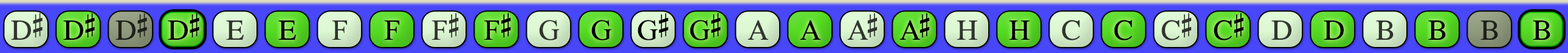
<style>
.page{position:relative;width:1568px;height:53px}
.page>*{position:absolute;margin:0}
.t1{font:29.2px "OpusChords";letter-spacing:-0.025em;color:#2f352d}
.t2{font:29.2px "OpusChords";letter-spacing:-0.025em;color:#000000}
.t3{font:29.2px "OpusChords";letter-spacing:-0.025em;color:#1e211b}
.t4{font:29.2px "OpusChords";color:#30352d}
.t5{font:29.2px "OpusChords";color:#000000}
.t6{font:29.2px "OpusChords";letter-spacing:-0.1em;color:#2f352d}
.t7{font:29.2px "OpusChords";letter-spacing:-0.1em;color:#000000}
.t8{font:29.2px "OpusChords";color:#2f352d}
.t9{font:29.2px "OpusChords";color:#30362e}
.t10{font:29.2px "OpusChords";color:#1f211b}
</style>
<div class="page">
<p class="t1" style="left:11px;top:13px;width:32px;height:27px">D#</p>
<p class="t2" style="left:63px;top:13px;width:32px;height:27px">D#</p>
<p class="t3" style="left:115px;top:13px;width:32px;height:27px">D#</p>
<p class="t2" style="left:168px;top:13px;width:31px;height:27px">D#</p>
<p class="t4" style="left:432px;top:13px;width:27px;height:27px">F#</p>
<p class="t5" style="left:484px;top:13px;width:27px;height:27px">F#</p>
<p class="t2" style="left:638px;top:13px;width:31px;height:28px">G#</p>
<p class="t2" style="left:690px;top:13px;width:31px;height:28px">G#</p>
<p class="t6" style="left:847px;top:13px;width:30px;height:27px">A#</p>
<p class="t7" style="left:899px;top:13px;width:30px;height:27px">A#</p>
<p class="t8" style="left:1161px;top:13px;width:30px;height:28px">C#</p>
<p class="t5" style="left:1214px;top:13px;width:29px;height:28px">C#</p>
<p class="t9" style="left:226px;top:21px;width:18px;height:19px">E</p>
<p class="t5" style="left:278px;top:21px;width:18px;height:19px">E</p>
<p class="t9" style="left:332px;top:21px;width:15px;height:19px">F</p>
<p class="t5" style="left:384px;top:21px;width:15px;height:19px">F</p>
<p class="t8" style="left:539px;top:20px;width:20px;height:21px">G</p>
<p class="t5" style="left:591px;top:20px;width:20px;height:21px">G</p>
<p class="t8" style="left:748px;top:20px;width:20px;height:20px">A</p>
<p class="t5" style="left:800px;top:20px;width:20px;height:20px">A</p>
<p class="t4" style="left:957px;top:21px;width:20px;height:19px">H</p>
<p class="t5" style="left:1009px;top:21px;width:21px;height:19px">H</p>
<p class="t9" style="left:1062px;top:20px;width:18px;height:21px">C</p>
<p class="t5" style="left:1114px;top:20px;width:18px;height:21px">C</p>
<p class="t8" style="left:1271px;top:21px;width:20px;height:19px">D</p>
<p class="t5" style="left:1324px;top:21px;width:20px;height:19px">D</p>
<p class="t4" style="left:1376px;top:21px;width:18px;height:19px">B</p>
<p class="t5" style="left:1428px;top:21px;width:18px;height:19px">B</p>
<p class="t10" style="left:1480px;top:21px;width:18px;height:19px">B</p>
<p class="t5" style="left:1533px;top:21px;width:17px;height:19px">B</p>
</div>
